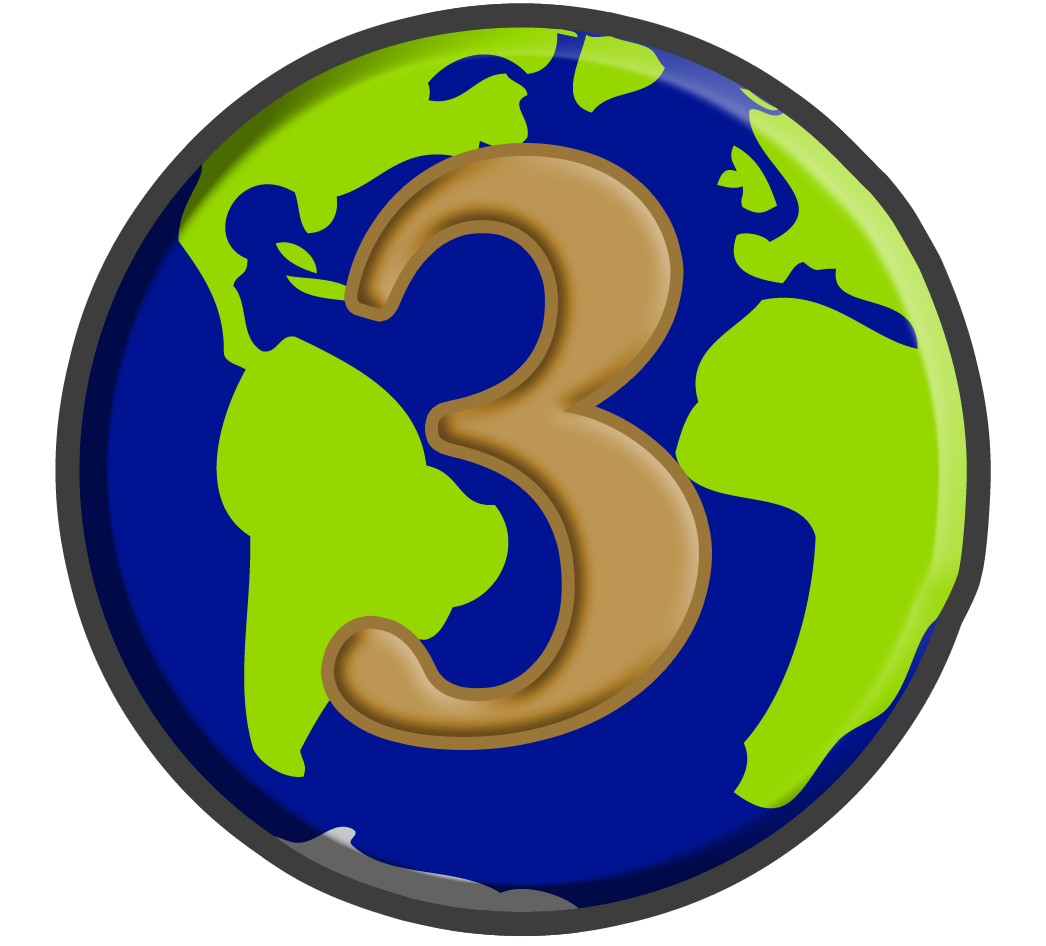
<style>
.page{position:relative;width:1046px;height:946px;background:#ffffff}
.page>*{position:absolute;margin:0}
.t1{font:833.3px "ACaslonPro-Bold"}
</style>
<div class="page">
<p class="t1" style="left:333px;top:155px;width:366px;height:582px">3</p>
</div>
